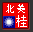
<style>
.page{position:relative;width:33px;height:32px;background:#f20000}
.page>*{position:absolute;margin:0}
.t1{font:10.4px "SimSun";color:#ffffff}
.t2{font:11.7px "SimSun";color:#ffffff}
</style>
<div class="page">
<p class="t1" style="left:6px;top:4px;width:19px;height:9px">北美</p>
<p class="t2" style="left:16px;top:15px;width:11px;height:12px">桂</p>
</div>
